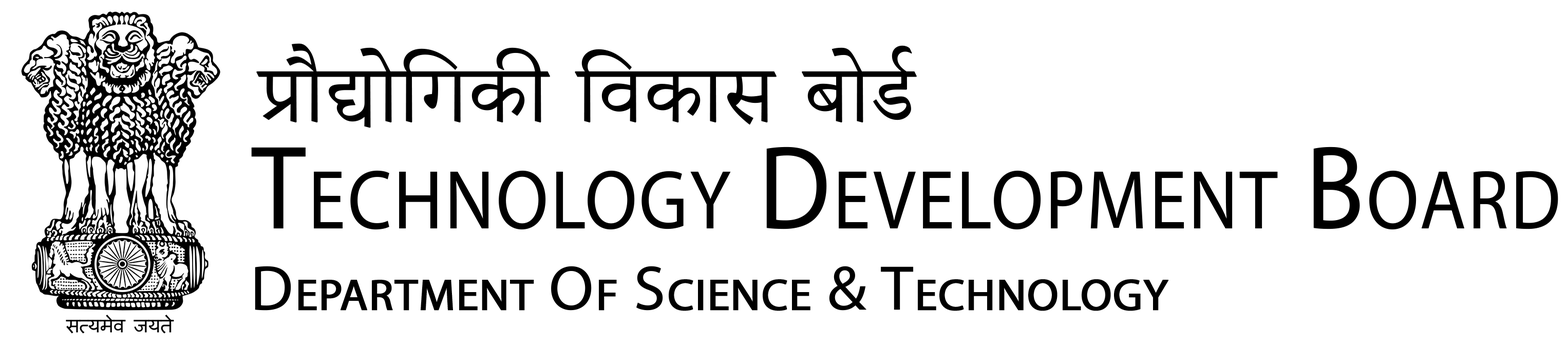
<style>
.page{position:relative;width:1568px;height:343px;background:#ffffff}
.page>*{position:absolute;margin:0}
.t1{font:100.4px "AdobeDevanagari-Regular";color:#000000;font-weight:bold}
.t2{font:119.6px "MyriadPro-Regular";color:#000000;font-variant:small-caps;font-weight:bold;scale:0.9 1}
.t3{font:63.6px "MyriadPro-Regular";color:#000000;font-variant:small-caps;font-weight:bold}
</style>
<div class="page">
<p class="t1" style="left:256px;top:43px;width:661px;height:85px">प्रौद्योगिकी विकास बोर्ड</p>
<p class="t2" style="left:251px;top:146px;width:1307px;height:84px">Technology Development Board</p>
<p class="t3" style="left:255px;top:266px;width:913px;height:45px">Department Of Science &amp; Technology</p>
</div>
